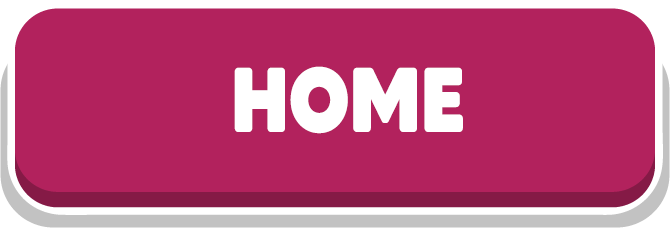
<style>
.page{position:relative;width:670px;height:236px;background:#b2225d}
.page>*{position:absolute;margin:0}
.t1{font:91.4px "MADETommySoft-Black";color:#ffffff;scale:0.84 1}
</style>
<div class="page">
<p class="t1" style="left:234px;top:66px;width:229px;height:68px">HOME</p>
</div>
